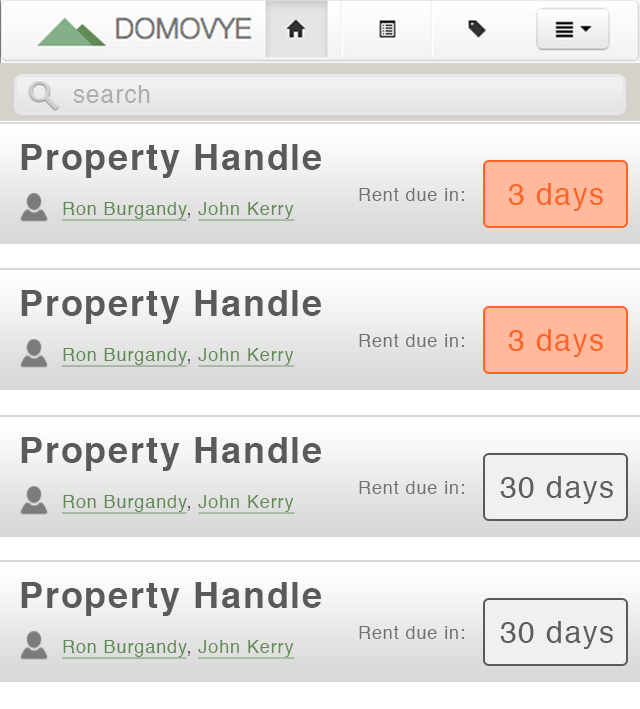
<style>
.page{position:relative;width:640px;height:709px}
.page>*{position:absolute;margin:0}
.t1{font:24px "Helvetica";letter-spacing:0.05em;color:#adadad}
.t2{font:36px "Helvetica-Bold";letter-spacing:0.05em;color:#5a5a5a}
.t3{font:30px "Helvetica";letter-spacing:0.05em;color:#ff6427}
.t4{font:18px "Helvetica";letter-spacing:0.05em;color:#717171}
.t5{font:18px "Helvetica";letter-spacing:0.05em;color:#5e8953;text-decoration:underline}
.t6{font:18px "Helvetica";letter-spacing:0.05em;color:#5a5a5a}
.t7{font:18px "Helvetica";letter-spacing:0.05em;color:#638c58;text-decoration:underline}
.t8{font:30px "Helvetica";letter-spacing:0.05em;color:#5e5e5e}
</style>
<div class="page">
<p class="t1" style="left:73px;top:85px;width:77px;height:18px">search</p>
<p class="t2" style="left:21px;top:144px;width:300px;height:34px">Property Handle</p>
<p class="t3" style="left:508px;top:183px;width:95px;height:28px">3 days</p>
<p class="t4" style="left:359px;top:188px;width:105px;height:13px">Rent due in:</p>
<p class="t5" style="left:62px;top:202px;width:233px;height:19px">Ron Burgandy<span class="t6">, </span><span class="t7">John Kerry</span></p>
<p class="t2" style="left:21px;top:290px;width:300px;height:34px">Property Handle</p>
<p class="t3" style="left:508px;top:329px;width:95px;height:28px">3 days</p>
<p class="t4" style="left:359px;top:334px;width:105px;height:13px">Rent due in:</p>
<p class="t5" style="left:62px;top:348px;width:233px;height:19px">Ron Burgandy<span class="t6">, </span><span class="t7">John Kerry</span></p>
<p class="t2" style="left:21px;top:437px;width:300px;height:34px">Property Handle</p>
<p class="t4" style="left:359px;top:481px;width:105px;height:13px">Rent due in:</p>
<p class="t8" style="left:500px;top:476px;width:113px;height:28px">30 days</p>
<p class="t5" style="left:62px;top:495px;width:233px;height:19px">Ron Burgandy<span class="t6">, </span><span class="t7">John Kerry</span></p>
<p class="t2" style="left:21px;top:582px;width:300px;height:34px">Property Handle</p>
<p class="t4" style="left:359px;top:626px;width:105px;height:13px">Rent due in:</p>
<p class="t8" style="left:500px;top:621px;width:113px;height:28px">30 days</p>
<p class="t5" style="left:62px;top:640px;width:233px;height:19px">Ron Burgandy<span class="t6">, </span><span class="t7">John Kerry</span></p>
</div>
